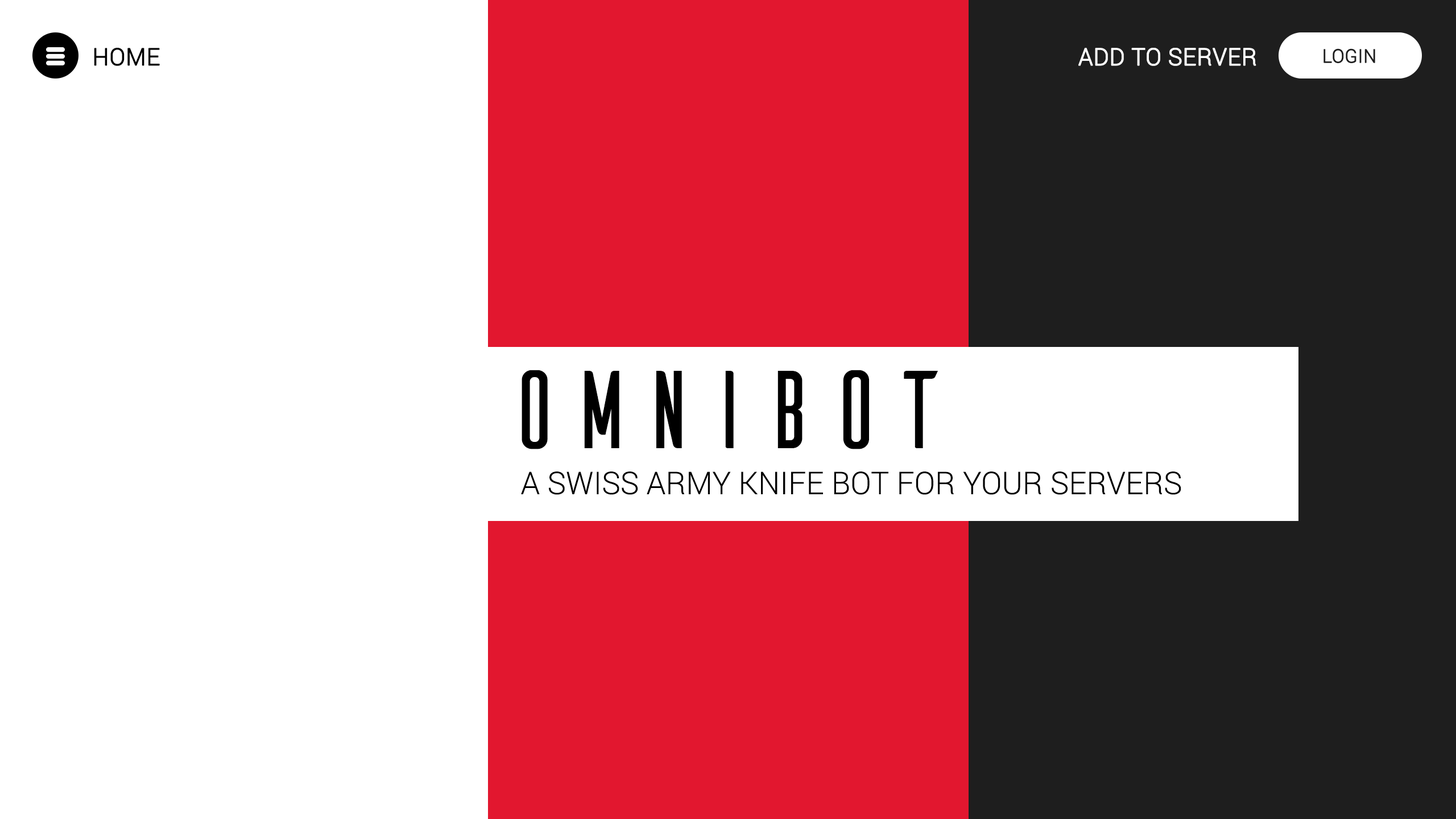
<style>
.page{position:relative;width:1456px;height:819px;background:#ffffff}
.page>*{position:absolute;margin:0}
.t1{font:23.7px "Roboto-Light";color:#000000;text-transform:uppercase;font-weight:bold}
.t2{font:23.7px "Roboto-Light";color:#ffffff;text-transform:uppercase;font-weight:bold}
.t3{font:18.7px "Roboto-Light";color:#1e1e1e;text-transform:uppercase;font-weight:bold}
.t4{font:110.4px "Ailerons-Regular";color:#000000}
.t5{font:31.4px "Roboto-Light";color:#000000;text-transform:uppercase}
</style>
<div class="page">
<p class="t1" style="left:94px;top:48px;width:66px;height:18px">HOME</p>
<p class="t2" style="left:1078px;top:48px;width:178px;height:18px">ADD TO SERVER</p>
<p class="t3" style="left:1323px;top:48px;width:52px;height:15px">LOGIN</p>
<p class="t4" style="left:522px;top:370px;width:416px;height:79px">OMNIBOT</p>
<p class="t5" style="left:521px;top:471px;width:660px;height:24px">a swiss army knife bot for your servers</p>
</div>
